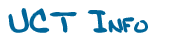
<style>
.page{position:relative;width:189px;height:45px;background:#ffffff}
.page>*{position:absolute;margin:0}
.t1{font:30px "BobbiesHand";color:#006699}
.t2{font:18px "BobbiesHand";color:#006699}
</style>
<div class="page">
<p class="t1" style="left:9px;top:9px;width:138px;height:23px">UCT I<span class="t2">NFO</span></p>
</div>
